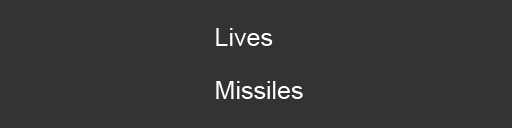
<style>
.page{position:relative;width:512px;height:128px;background:#333333}
.page>*{position:absolute;margin:0}
.t1{font:25px "ArialMT";color:#ffffff}
</style>
<div class="page">
<p class="t1" style="left:216px;top:28px;width:57px;height:18px">Lives</p>
<p class="t1" style="left:216px;top:81px;width:87px;height:18px">Missiles</p>
</div>
